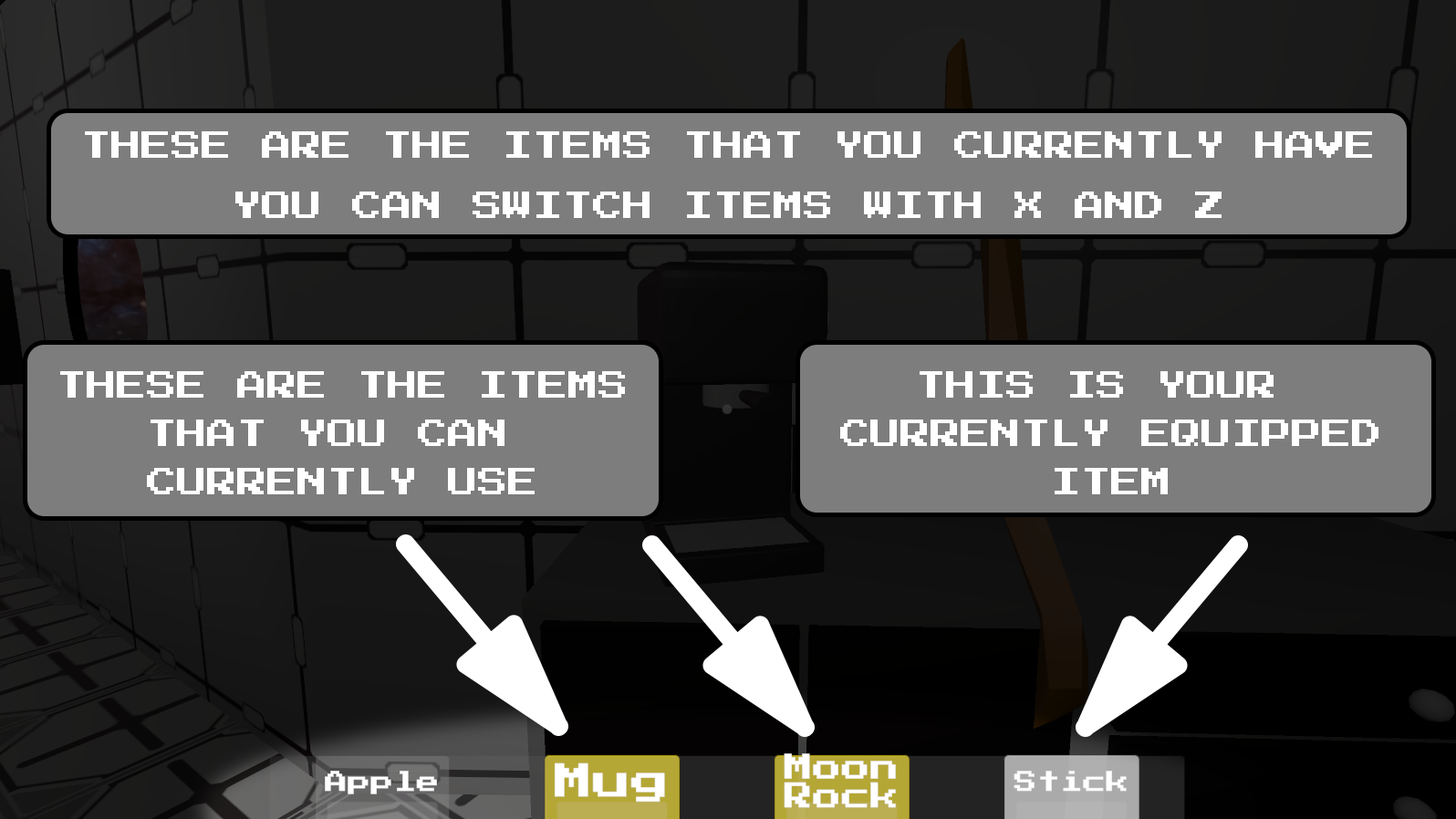
<style>
.page{position:relative;width:1456px;height:819px;background:#7d7d7d}
.page>*{position:absolute;margin:0}
.t1{font:30.4px/60.8px "PressStart2P-Regular";color:#ffffff;text-transform:uppercase}
.t2{font:30.4px/48.6px "PressStart2P-Regular";color:#ffffff;text-transform:uppercase}
</style>
<div class="page">
<p class="t1" style="left:85px;top:131px;width:1287px;height:87px;text-align:center">These are the items that you currently have<br>you can switch items with x and z</p>
<p class="t2" style="left:60px;top:371px;width:565px;height:123px;text-align:center">These are the items<br>that you can <br>currently use</p>
<p class="t2" style="left:840px;top:371px;width:538px;height:123px;text-align:center">This is your <br>currently equipped<br>item</p>
</div>
